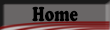
<style>
.page{position:relative;width:110px;height:30px;background:#696666}
.page>*{position:absolute;margin:0}
.t1{font:20px "CooperBlackStd";color:#000000;scale:0.75 1}
</style>
<div class="page">
<p class="t1" style="left:32px;top:6px;width:46px;height:16px">Home</p>
</div>
